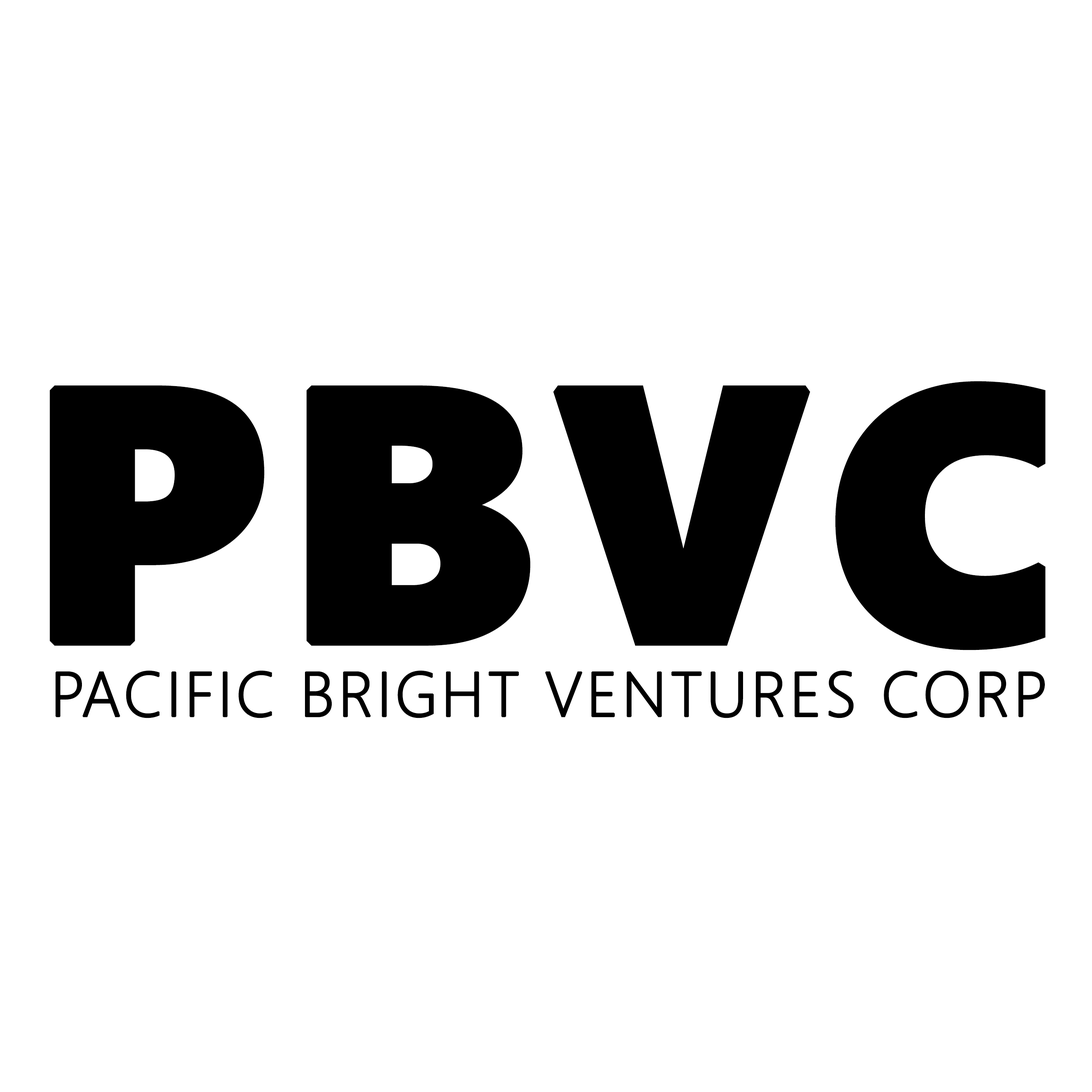
<style>
.page{position:relative;width:1092px;height:1092px;background:#ffffff}
.page>*{position:absolute;margin:0}
.t1{font:62.9px "SegoeUI-Light";letter-spacing:0.035em;color:#000000;font-weight:bold}
.t2{font:357.8px "SegoeUIBlack";letter-spacing:0.035em;color:#000000;font-weight:bold}
</style>
<div class="page">
<p class="t1" style="left:50px;top:381px;width:996px;height:337px"><span class="t2">PBVC<br> </span>PACIFIC BRIGHT VENTURES CORP</p>
</div>
